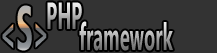
<style>
.page{position:relative;width:217px;height:53px;background:#333333}
.page>*{position:absolute;margin:0}
.t1{font:48.6px "Gadugi-Bold";scale:0.48 1}
.t2{font:62.1px "Gadugi-Bold";scale:0.48 1}
.t3{font:37.8px "Gadugi-Bold";scale:0.48 1}
</style>
<div class="page">
<p class="t1" style="left:2px;top:5px;width:45px;height:46px">&lt;<span class="t2">S</span>&gt;</p>
<p class="t3" style="left:47px;top:2px;width:35px;height:27px">PHP</p>
<p class="t3" style="left:79px;top:21px;width:94px;height:30px">framework</p>
</div>
